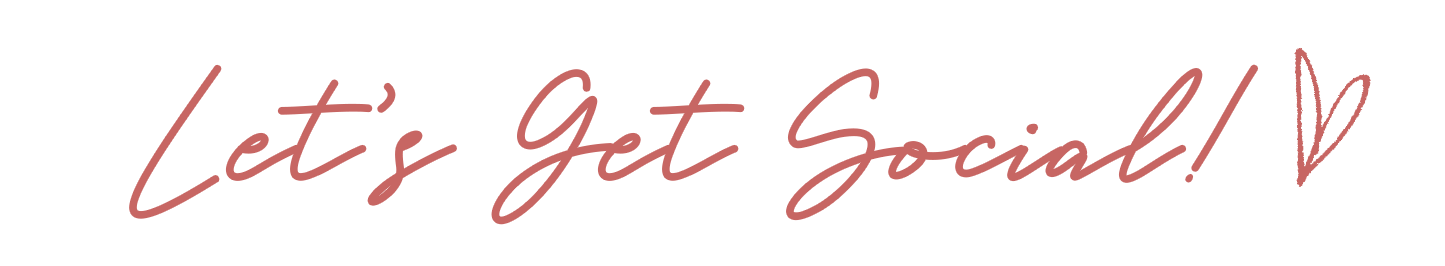
<style>
.page{position:relative;width:1445px;height:266px;background:#ffffff}
.page>*{position:absolute;margin:0}
.t1{font:109.2px "WhiteAngelicaRegular";color:#c76663;font-weight:bold}
</style>
<div class="page">
<p class="t1" style="left:131px;top:66px;width:1126px;height:157px">Let’s Get Social!</p>
</div>
